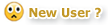
<style>
.page{position:relative;width:108px;height:25px;background:#ffffff}
.page>*{position:absolute;margin:0}
.t1{font:12.5px "Verdana-Bold";color:#c29725;scale:0.92 1}
</style>
<div class="page">
<p class="t1" style="left:29px;top:7px;width:72px;height:11px">New User ?</p>
</div>
